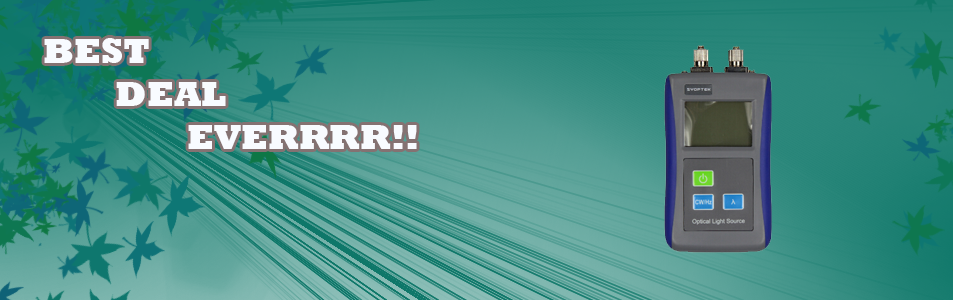
<style>
.page{position:relative;width:953px;height:300px}
.page>*{position:absolute;margin:0}
.t1{font:36px "Rockwell-ExtraBold";color:#f8fbff}
</style>
<div class="page">
<p class="t1" style="left:44px;top:38px;width:373px;height:111px">BEST <br>  DEAL<br>    EVERRRR!!</p>
</div>
